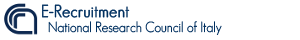
<style>
.page{position:relative;width:300px;height:40px;background:#ffffff}
.page>*{position:absolute;margin:0}
.t1{font:17.3px "GeosansLight";color:#002f5f;font-weight:bold;scale:0.93 1}
.t2{font:14.3px "GeosansLight";color:#002f5f;scale:0.93 1}
</style>
<div class="page">
<p class="t1" style="left:42px;top:4px;width:88px;height:14px">E-Recruitment</p>
<p class="t2" style="left:48px;top:21px;width:174px;height:14px">National Research Council of Italy</p>
</div>
